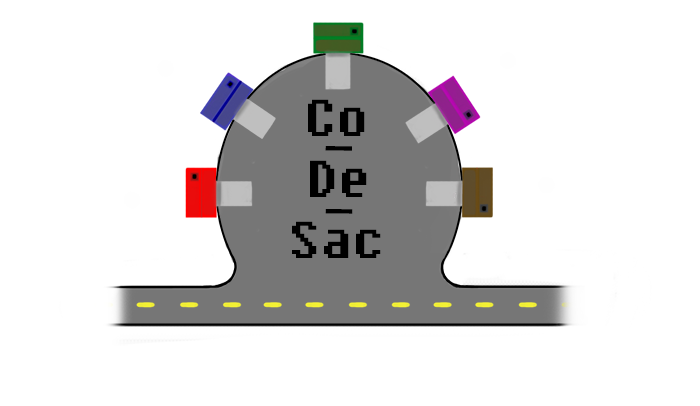
<style>
.page{position:relative;width:700px;height:406px;background:#ffffff}
.page>*{position:absolute;margin:0}
.t1{font:51.7px "Fixedsys";color:#000000}
.t2{font:56.4px "Fixedsys";color:#000000}
.t3{font:56.6px "Fixedsys";color:#000000}
</style>
<div class="page">
<p class="t1" style="left:308px;top:99px;width:57px;height:37px">Co</p>
<p class="t2" style="left:325px;top:146px;width:27px;height:5px;rotate:1deg">-</p>
<p class="t1" style="left:310px;top:160px;width:57px;height:37px">De</p>
<p class="t3" style="left:325px;top:209px;width:28px;height:5px;rotate:1deg">-</p>
<p class="t1" style="left:292px;top:221px;width:89px;height:37px">Sac</p>
</div>
